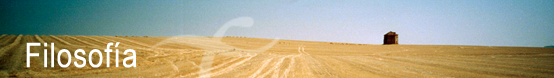
<style>
.page{position:relative;width:554px;height:78px}
.page>*{position:absolute;margin:0}
.t1{font:34px "ArialNarrow";color:#ffffff;font-weight:bold}
</style>
<div class="page">
<p class="t1" style="left:26px;top:42px;width:111px;height:26px">Filosofía</p>
</div>
